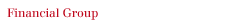
<style>
.page{position:relative;width:250px;height:23px;background:#ffffff}
.page>*{position:absolute;margin:0}
.t1{font:12px "Justus-Roman";letter-spacing:-0.01em;color:#bf091d}
</style>
<div class="page">
<p class="t1" style="left:7px;top:8px;width:91px;height:12px">Financial Group</p>
</div>
